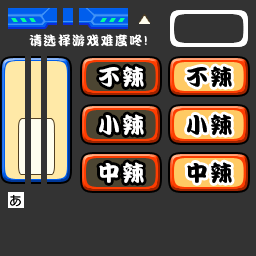
<style>
.page{position:relative;width:256px;height:256px;background:#333333}
.page>*{position:absolute;margin:0}
.t1{font:13px "DFPKanTingLiuW9";letter-spacing:0.1em;color:#ffffff}
.t2{font:22px "DFPKanTingLiuW9";letter-spacing:0.1em;color:#ffffff}
.t3{font:22px "DFPKanTingLiuW9";letter-spacing:0.1em;color:#000000}
</style>
<div class="page">
<p class="t1" style="left:29px;top:34px;width:118px;height:13px">请选择游戏难度咚!</p>
<p class="t2" style="left:99px;top:66px;width:45px;height:21px">不辣</p>
<p class="t3" style="left:187px;top:66px;width:45px;height:21px">不辣</p>
<p class="t2" style="left:99px;top:114px;width:45px;height:21px">小辣</p>
<p class="t3" style="left:187px;top:114px;width:45px;height:21px">小辣</p>
<p class="t2" style="left:99px;top:162px;width:45px;height:21px">中辣</p>
<p class="t3" style="left:187px;top:162px;width:45px;height:21px">中辣</p>
</div>
